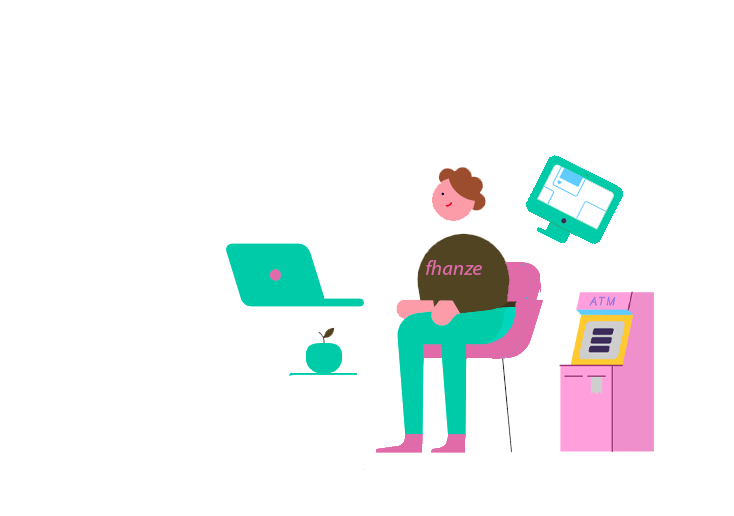
<style>
.page{position:relative;width:734px;height:516px;background:#ffffff}
.page>*{position:absolute;margin:0}
.t1{font:20.8px "MyriadPro-It";color:#e16aa8}
</style>
<div class="page">
<p class="t1" style="left:426px;top:260px;width:56px;height:15px">fhanze</p>
</div>
